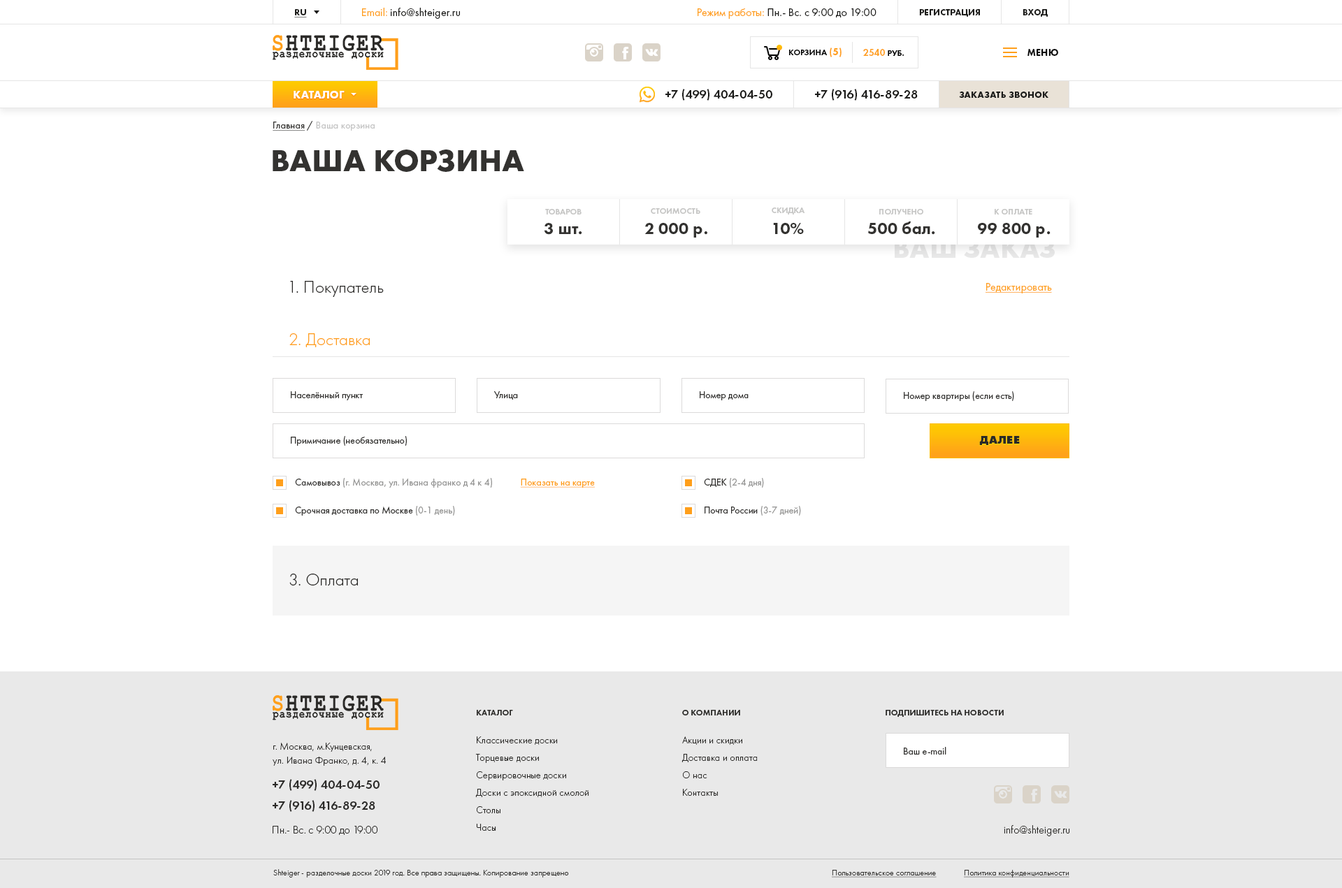
<style>
.page{position:relative;width:1342px;height:888px;background:#ffffff}
.page>*{position:absolute;margin:0}
.t1{font:9.8px "FuturaPT-Book";letter-spacing:0.02em;color:#c4c4c4}
.t2{font:9.8px "FuturaPT-Book";letter-spacing:0.02em;color:#333230;text-decoration:underline}
.t3{font:9.8px "FuturaPT-Book";letter-spacing:0.02em;color:#333230}
.t4{font:31.5px "FuturaPT-Bold";color:#333230;text-transform:uppercase}
.t5{font:8.4px "FuturaPT-Demi";color:#c6c6c5;text-transform:uppercase}
.t6{font:16.8px "FuturaPT-Heavy";color:#333230}
.t7{font:28px "FuturaPT-Bold";color:#e5e5e5;text-transform:uppercase}
.t8{font:17.5px "FuturaPT-Light";color:#2b2a28}
.t9{font:11.2px "FuturaPT-Book";color:#ff9f1b;text-decoration:underline}
.t10{font:17.5px "FuturaPT-Light";color:#ff9f1b}
.t11{font:9.8px "FuturaPT-Book";color:#333230}
.t12{font:11.2px "FuturaPT-ExtraBold";letter-spacing:0.02em;color:#2b2a28;text-transform:uppercase}
.t13{font:9.8px "FuturaPT-Book";color:#979796}
.t14{font:9.8px "FuturaPT-Book";color:#ff9f1b;text-decoration:underline}
</style>
<div class="page">
<p class="t1" style="left:273px;top:121px;width:102px;height:10px"><span class="t2">Главная</span><span class="t3"> / </span>Ваша корзина</p>
<p class="t4" style="left:273px;top:150px;width:251px;height:22px">Ваша корзина</p>
<p class="t5" style="left:545px;top:209px;width:37px;height:6px">Товаров</p>
<p class="t5" style="left:651px;top:208px;width:49px;height:6px">Стоимость</p>
<p class="t5" style="left:772px;top:208px;width:33px;height:7px">Скидка</p>
<p class="t5" style="left:879px;top:209px;width:44px;height:6px">Получено</p>
<p class="t5" style="left:995px;top:209px;width:37px;height:6px">К оплате</p>
<p class="t6" style="left:868px;top:222px;width:67px;height:13px">500 бал.</p>
<p class="t6" style="left:544px;top:223px;width:38px;height:12px">3 шт.</p>
<p class="t6" style="left:645px;top:223px;width:62px;height:15px">2 000 р.</p>
<p class="t6" style="left:773px;top:223px;width:31px;height:11px">10%</p>
<p class="t6" style="left:978px;top:223px;width:73px;height:15px">99 800 р.</p>
<p class="t7" style="left:895px;top:239px;width:160px;height:19px">Ваш заказ</p>
<p class="t8" style="left:290px;top:281px;width:94px;height:16px">1. Покупатель</p>
<p class="t9" style="left:985px;top:283px;width:67px;height:11px">Редактировать</p>
<p class="t10" style="left:289px;top:333px;width:81px;height:14px">2. Доставка</p>
<p class="t11" style="left:291px;top:391px;width:72px;height:10px">Населённый пункт</p>
<p class="t11" style="left:494px;top:391px;width:24px;height:9px">Улица</p>
<p class="t11" style="left:700px;top:391px;width:49px;height:10px">Номер дома</p>
<p class="t11" style="left:904px;top:391px;width:110px;height:10px">Номер квартиры (если есть)</p>
<p class="t11" style="left:291px;top:436px;width:116px;height:10px">Примичание (необязательно)</p>
<p class="t12" style="left:979px;top:436px;width:41px;height:9px">Далее</p>
<p class="t13" style="left:295px;top:478px;width:197px;height:10px"><span class="t11">Самовывоз </span>(г. Москва, ул. Ивана франко д 4 к 4)</p>
<p class="t14" style="left:520px;top:479px;width:75px;height:9px">Показать на карте</p>
<p class="t13" style="left:704px;top:478px;width:60px;height:10px"><span class="t11">СДЕК </span>(2-4 дня)</p>
<p class="t11" style="left:295px;top:506px;width:160px;height:10px">Срочная доставка по Москве <span class="t13">(0-1 день)</span></p>
<p class="t11" style="left:705px;top:506px;width:96px;height:10px">Почта России <span class="t13">(3-7 дней)</span></p>
<p class="t8" style="left:289px;top:574px;width:69px;height:12px">3. Оплата</p>
</div>
